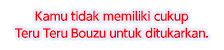
<style>
.page{position:relative;width:224px;height:50px;background:#ffffff}
.page>*{position:absolute;margin:0}
.t1{font:12px/17px "UDShinGoPro-DeBold";letter-spacing:-0.04em;color:#ff0000}
</style>
<div class="page">
<p class="t1" style="left:15px;top:10px;width:193px;height:28px;text-align:center">Kamu tidak memiliki cukup<br>Teru Teru Bouzu untuk ditukarkan.</p>
</div>
